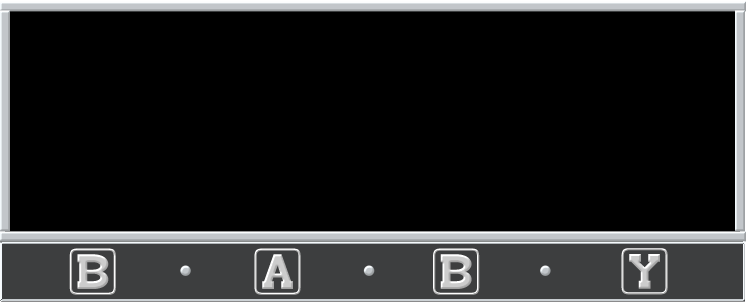
<style>
.page{position:relative;width:746px;height:302px;background:#000000}
.page>*{position:absolute;margin:0}
.t1{font:38.4px "babybloc"}
</style>
<div class="page">
<p class="t1" style="left:69px;top:248px;width:47px;height:47px">B</p>
<p class="t1" style="left:254px;top:248px;width:47px;height:47px">A</p>
<p class="t1" style="left:433px;top:248px;width:47px;height:47px">B</p>
<p class="t1" style="left:621px;top:248px;width:47px;height:47px">Y</p>
</div>
